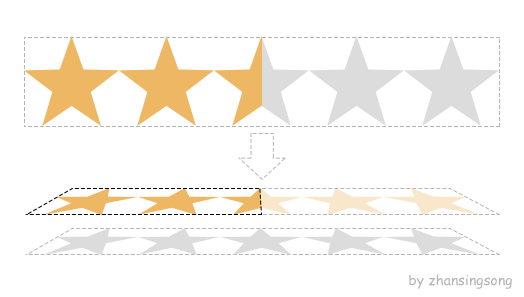
<style>
.page{position:relative;width:524px;height:297px;background:#ffffff}
.page>*{position:absolute;margin:0}
.t1{font:14px "ComicSansMS";color:#b5b5b5}
</style>
<div class="page">
<p class="t1" style="left:409px;top:274px;width:103px;height:15px">by zhansingsong</p>
</div>
